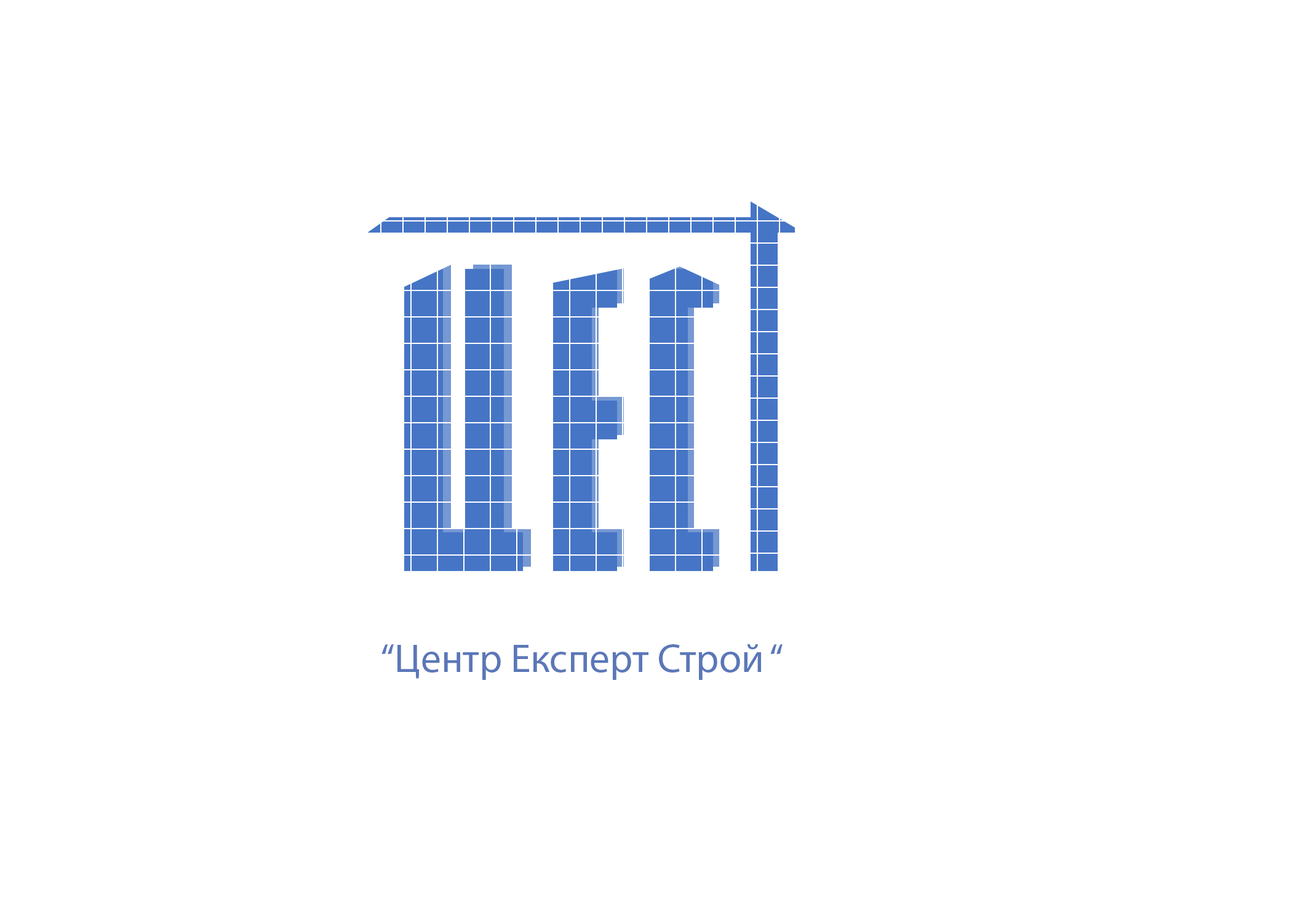
<style>
.page{position:relative;width:1292px;height:923px;background:#ffffff}
.page>*{position:absolute;margin:0}
.t1{font:40.4px "MyriadPro-Regular";color:#5b77b8}
</style>
<div class="page">
<p class="t1" style="left:381px;top:644px;width:402px;height:36px">“Центр Експерт Строй “</p>
</div>
